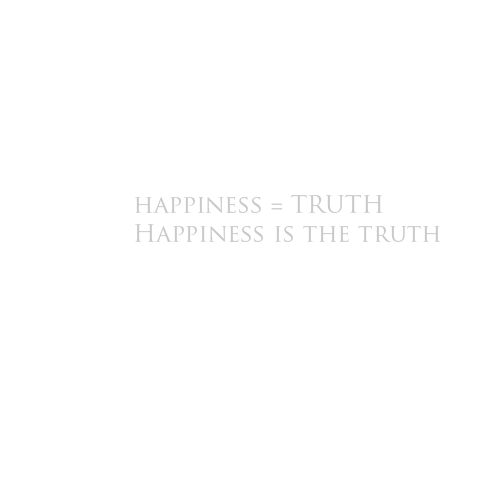
<style>
.page{position:relative;width:504px;height:504px;background:#ffffff}
.page>*{position:absolute;margin:0}
.t1{font:24px "TrajanPro-Regular";color:#c9c9c9}
</style>
<div class="page">
<p class="t1" style="left:135px;top:194px;width:305px;height:48px">happiness = TRUTH<br>Happiness is the truth</p>
</div>
